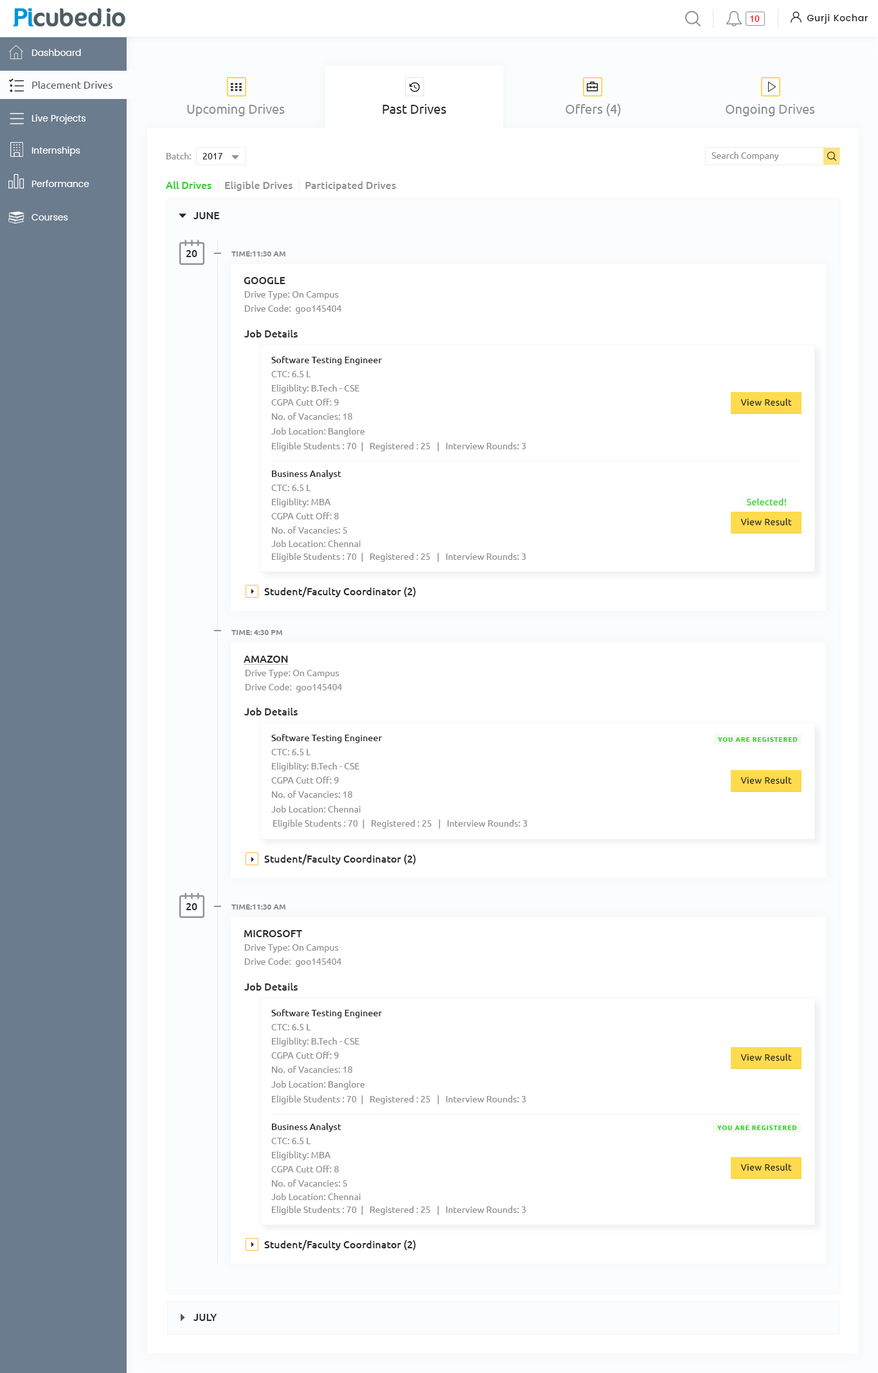
<style>
.page{position:relative;width:878px;height:1373px;background:#ffffff}
.page>*{position:absolute;margin:0}
.t1{font:12.9px "Ubuntu";color:#909090}
.t2{font:12.9px "Ubuntu";color:#282828}
.t3{font:9px "Ubuntu";color:#909090}
.t4{font:9px "Ubuntu";color:#282828}
.t5{font:10.3px "Ubuntu-Medium";color:#25cd18}
.t6{font:10.3px "Ubuntu-Medium";color:#909090}
.t7{font:10.3px "Ubuntu-Medium";color:#282828;text-transform:uppercase}
.t8{font:7.7px "Ubuntu-Bold";color:#909090;text-transform:uppercase}
.t9{font:9px/14.1px "Ubuntu";color:#909090}
.t10{font:10.3px "Ubuntu-Medium";color:#282828}
.t11{font:9px "Ubuntu-Medium";color:#282828}
.t12{font:9px "Ubuntu";letter-spacing:0.03em;color:#282828}
.t13{font:9px "Ubuntu";letter-spacing:0.03em;color:#25cd18}
.t14{font:10.3px "Ubuntu-Medium";color:#282828;text-transform:uppercase;text-decoration:underline}
</style>
<div class="page">
<p class="t1" style="left:187px;top:104px;width:98px;height:12px">Upcoming Drives</p>
<p class="t2" style="left:382px;top:104px;width:64px;height:10px">Past Drives</p>
<p class="t1" style="left:566px;top:104px;width:55px;height:12px">Offers (4)</p>
<p class="t1" style="left:726px;top:104px;width:89px;height:12px">Ongoing Drives</p>
<p class="t3" style="left:166px;top:152px;width:25px;height:7px">Batch:</p>
<p class="t4" style="left:203px;top:153px;width:19px;height:6px">2017</p>
<p class="t3" style="left:712px;top:152px;width:67px;height:9px">Search Company</p>
<p class="t5" style="left:166px;top:181px;width:46px;height:8px">All Drives</p>
<p class="t6" style="left:225px;top:181px;width:171px;height:10px">Eligible Drives     Participated Drives</p>
<p class="t7" style="left:194px;top:212px;width:26px;height:7px">June</p>
<p class="t7" style="left:186px;top:250px;width:11px;height:7px">20</p>
<p class="t8" style="left:231px;top:251px;width:55px;height:5px">Time:11:30 Am</p>
<p class="t7" style="left:244px;top:277px;width:41px;height:7px">Google</p>
<p class="t9" style="left:245px;top:291px;width:96px;height:23px">Drive Type: On Campus<br>Drive Code:  goo145404</p>
<p class="t10" style="left:244px;top:330px;width:54px;height:8px">Job Details</p>
<p class="t11" style="left:271px;top:356px;width:111px;height:9px">Software Testing Engineer</p>
<p class="t9" style="left:271px;top:371px;width:89px;height:49px">CTC: 6.5 L<br>Eligiblity: B.Tech - CSE<br>CGPA Cutt Off: 9<br>No. of Vacancies: 18</p>
<p class="t12" style="left:741px;top:399px;width:51px;height:7px">View Result</p>
<p class="t3" style="left:271px;top:428px;width:94px;height:9px">Job Location: Banglore</p>
<p class="t3" style="left:272px;top:442px;width:254px;height:9px">Eligible Students : 70  |   Registered : 25   |   Interview Rounds: 3</p>
<p class="t11" style="left:272px;top:470px;width:69px;height:9px">Business Analyst</p>
<p class="t9" style="left:271px;top:485px;width:76px;height:49px">CTC: 6.5 L<br>Eligiblity: MBA<br>CGPA Cutt Off: 8<br>No. of Vacancies: 5</p>
<p class="t13" style="left:746px;top:498px;width:40px;height:8px">Selected!</p>
<p class="t12" style="left:741px;top:518px;width:51px;height:8px">View Result</p>
<p class="t3" style="left:271px;top:540px;width:90px;height:7px">Job Location: Chennai</p>
<p class="t3" style="left:272px;top:553px;width:254px;height:9px">Eligible Students : 70  |   Registered : 25   |   Interview Rounds: 3</p>
<p class="t10" style="left:264px;top:587px;width:152px;height:10px">Student/Faculty Coordinator (2)</p>
<p class="t8" style="left:231px;top:630px;width:52px;height:5px">Time: 4:30 Pm</p>
<p class="t14" style="left:244px;top:656px;width:45px;height:9px">Amazon</p>
<p class="t9" style="left:246px;top:670px;width:96px;height:22px">Drive Type: On Campus<br>Drive Code:  goo145404</p>
<p class="t10" style="left:244px;top:708px;width:54px;height:8px">Job Details</p>
<p class="t11" style="left:271px;top:734px;width:111px;height:9px">Software Testing Engineer</p>
<p class="t9" style="left:271px;top:749px;width:89px;height:49px">CTC: 6.5 L<br>Eligiblity: B.Tech - CSE<br>CGPA Cutt Off: 9<br>No. of Vacancies: 18</p>
<p class="t12" style="left:741px;top:777px;width:51px;height:7px">View Result</p>
<p class="t3" style="left:271px;top:806px;width:90px;height:7px">Job Location: Chennai</p>
<p class="t3" style="left:273px;top:820px;width:254px;height:9px">Eligible Students : 70  |   Registered : 25   |   Interview Rounds: 3</p>
<p class="t10" style="left:264px;top:854px;width:152px;height:11px">Student/Faculty Coordinator (2)</p>
<p class="t7" style="left:186px;top:903px;width:11px;height:7px">20</p>
<p class="t8" style="left:231px;top:905px;width:55px;height:5px">Time:11:30 Am</p>
<p class="t7" style="left:244px;top:930px;width:58px;height:7px">Microsoft</p>
<p class="t9" style="left:245px;top:944px;width:96px;height:23px">Drive Type: On Campus<br>Drive Code:  goo145404</p>
<p class="t10" style="left:244px;top:983px;width:54px;height:8px">Job Details</p>
<p class="t11" style="left:271px;top:1009px;width:111px;height:9px">Software Testing Engineer</p>
<p class="t9" style="left:271px;top:1024px;width:89px;height:49px">CTC: 6.5 L<br>Eligiblity: B.Tech - CSE<br>CGPA Cutt Off: 9<br>No. of Vacancies: 18</p>
<p class="t12" style="left:741px;top:1054px;width:51px;height:7px">View Result</p>
<p class="t3" style="left:271px;top:1081px;width:94px;height:9px">Job Location: Banglore</p>
<p class="t3" style="left:272px;top:1095px;width:254px;height:9px">Eligible Students : 70  |   Registered : 25   |   Interview Rounds: 3</p>
<p class="t11" style="left:272px;top:1123px;width:69px;height:9px">Business Analyst</p>
<p class="t9" style="left:271px;top:1138px;width:76px;height:49px">CTC: 6.5 L<br>Eligiblity: MBA<br>CGPA Cutt Off: 8<br>No. of Vacancies: 5</p>
<p class="t12" style="left:741px;top:1164px;width:51px;height:7px">View Result</p>
<p class="t3" style="left:271px;top:1193px;width:90px;height:7px">Job Location: Chennai</p>
<p class="t3" style="left:272px;top:1206px;width:254px;height:9px">Eligible Students : 70  |   Registered : 25   |   Interview Rounds: 3</p>
<p class="t10" style="left:264px;top:1240px;width:152px;height:10px">Student/Faculty Coordinator (2)</p>
<p class="t7" style="left:194px;top:1314px;width:23px;height:7px">July</p>
</div>
